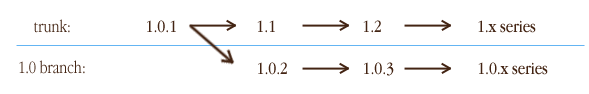
<style>
.page{position:relative;width:589px;height:94px;background:#ffffff}
.page>*{position:absolute;margin:0}
.t1{font:18px "AppleGaramondBT-Light";color:#432413}
.t2{font:18px "AppleGaramondBT-Book";color:#432413}
</style>
<div class="page">
<p class="t1" style="left:34px;top:19px;width:36px;height:14px">trunk:</p>
<p class="t2" style="left:147px;top:20px;width:29px;height:13px">1.0.1</p>
<p class="t2" style="left:257px;top:20px;width:18px;height:13px">1.1</p>
<p class="t2" style="left:363px;top:20px;width:18px;height:13px">1.2</p>
<p class="t2" style="left:478px;top:20px;width:58px;height:13px">1.x series</p>
<p class="t1" style="left:19px;top:60px;width:66px;height:14px">1.0 branch:</p>
<p class="t2" style="left:258px;top:62px;width:29px;height:13px">1.0.2</p>
<p class="t2" style="left:364px;top:62px;width:30px;height:14px">1.0.3</p>
<p class="t2" style="left:478px;top:62px;width:70px;height:13px">1.0.x series</p>
</div>
